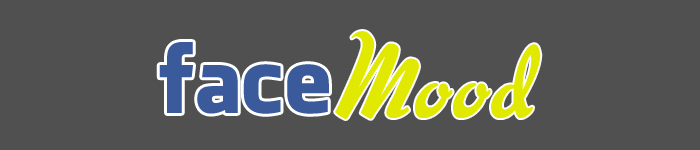
<style>
.page{position:relative;width:700px;height:150px;background:#505050}
.page>*{position:absolute;margin:0}
.t1{font:120px "BigSurprise";color:#e1e900}
.t2{font:90px "FacebookLetterFaces";color:#3b5a9b}
</style>
<div class="page">
<p class="t1" style="left:335px;top:31px;width:206px;height:88px">Mood</p>
<p class="t2" style="left:159px;top:42px;width:170px;height:72px">face</p>
</div>
